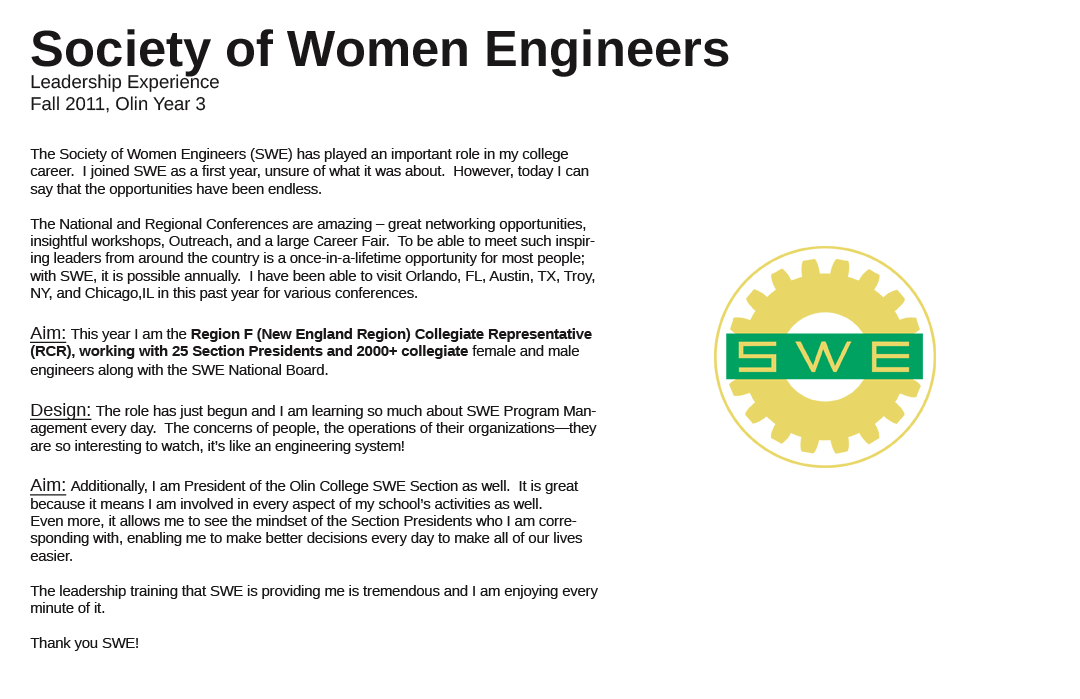
<style>
.page{position:relative;width:1080px;height:699px;background:#ffffff}
.page>*{position:absolute;margin:0}
.t1{font:18.5px "LiberationSans";color:#191717}
.t2{font:50.9px "LiberationSans-Bold";color:#191717}
.t3{font:14.5px "LiberationSans";color:#191717}
.t4{font:18px "LiberationSans";color:#191717;text-decoration:underline}
.t5{font:14.5px "LiberationSans-Bold";color:#191717}
</style>
<div class="page">
<p class="t1" style="left:31px;top:29px;width:698px;height:84px"><span class="t2">Society of Women Engineers<br></span>Leadership Experience<br>Fall 2011, Olin Year 3</p>
<p class="t3" style="left:30px;top:148px;width:568px;height:503px">The Society of Women Engineers (SWE) has played an important role in my college career.  I joined SWE as a first year, unsure of what it was about.  However, today I can say that the opportunities have been endless.  <br><br>The National and Regional Conferences are amazing – great networking opportunities, insightful workshops, Outreach, and a large Career Fair.  To be able to meet such inspiring leaders from around the country is a once-in-a-lifetime opportunity for most people; with SWE, it is possible annually.  I have been able to visit Orlando, FL, Austin, TX, Troy, NY, and Chicago,IL in this past year for various conferences.<br><br><span class="t4">Aim: </span>This year I am the <span class="t5">Region F (New England Region) Collegiate Representative (RCR), working with 25 Section Presidents and 2000+ collegiate</span> female and male engineers along with the SWE National Board.  <br><br><span class="t4">Design: </span>The role has just begun and I am learning so much about SWE Program Management every day.  The concerns of people, the operations of their organizations—they are so interesting to watch, it’s like an engineering system!  <br><br><span class="t4">Aim: </span>Additionally, I am President of the Olin College SWE Section as well.  It is great because it means I am involved in every aspect of my school’s activities as well.  <br>Even more, it allows me to see the mindset of the Section Presidents who I am corresponding with, enabling me to make better decisions every day to make all of our lives easier.<br><br>The leadership training that SWE is providing me is tremendous and I am enjoying every minute of it.  <br><br>Thank you SWE!</p>
</div>
